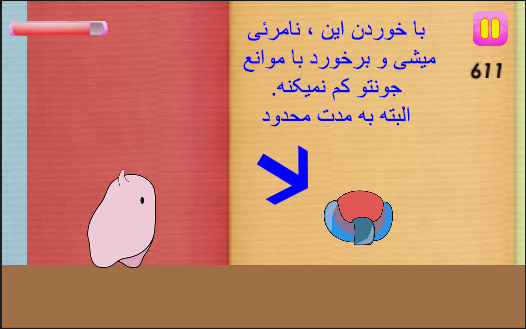
<style>
.page{position:relative;width:526px;height:329px}
.page>*{position:absolute;margin:0}
.t1{font:24px "ArialMT";color:#0000ff}
</style>
<div class="page">
<p class="t1" style="left:243px;top:20px;width:193px;height:107px;text-align:center">با خوردن این ، نامرئی<br>میشی و برخورد با موانع <br>جونتو کم نمیکنه.<br>البته به مدت محدود</p>
</div>
